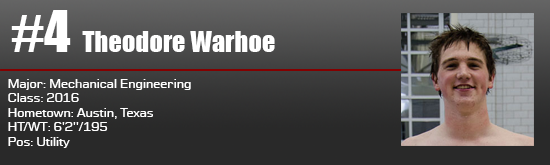
<style>
.page{position:relative;width:550px;height:165px}
.page>*{position:absolute;margin:0}
.t1{font:52.8px "Impact";color:#ffffff}
.t2{font:26.4px "Impact";color:#ffffff}
.t3{font:12px "Moire";color:#ffffff}
</style>
<div class="page">
<p class="t1" style="left:11px;top:10px;width:60px;height:42px">#4</p>
<p class="t2" style="left:82px;top:31px;width:193px;height:21px">Theodore Warhoe</p>
<p class="t3" style="left:8px;top:79px;width:183px;height:69px">Major: Mechanical Engineering<br>Class: 2016 <br>Hometown: Austin, Texas<br>HT/WT: 6'2''/195<br>Pos: Utility</p>
</div>
